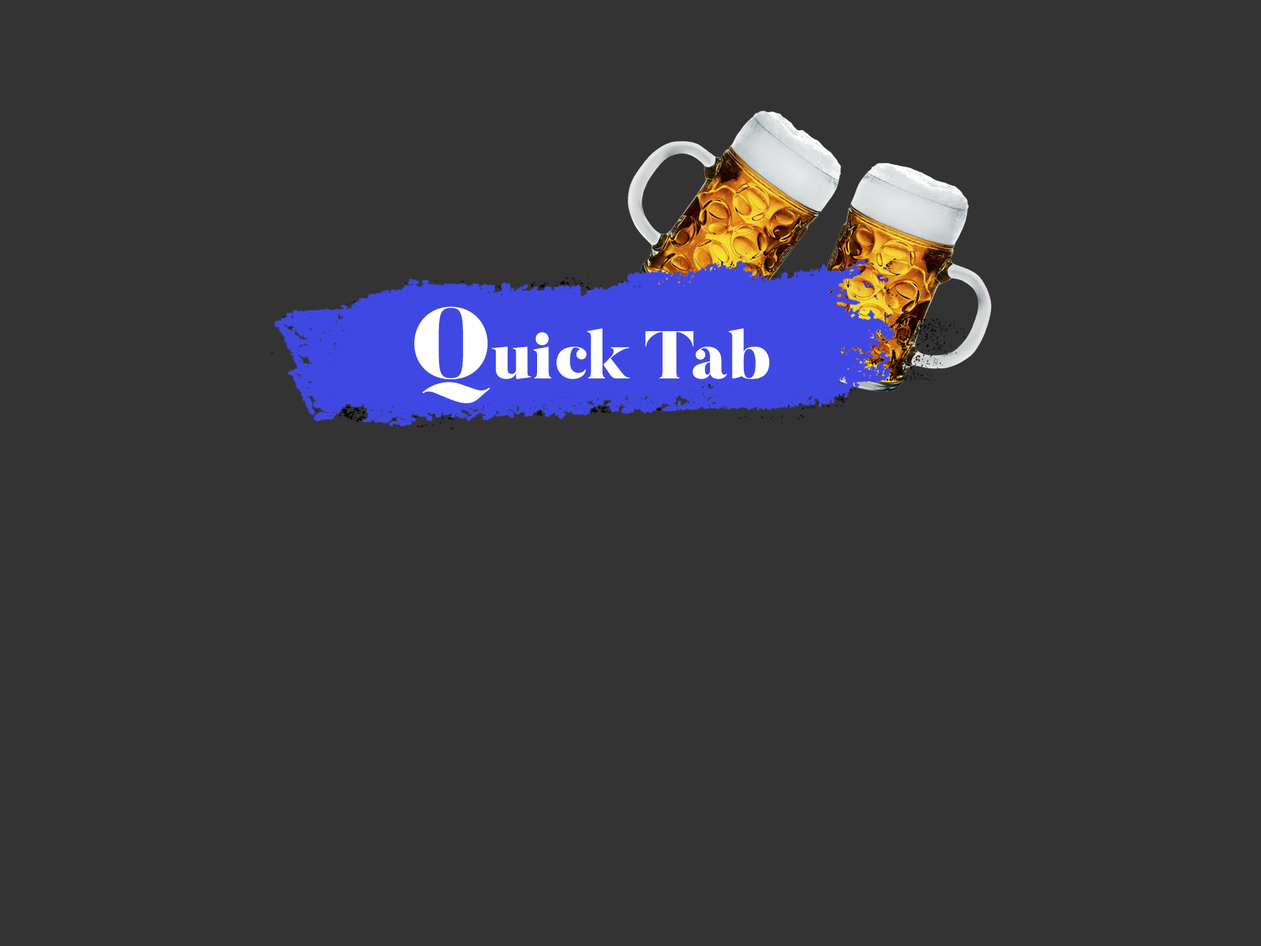
<style>
.page{position:relative;width:1261px;height:946px;background:#333333}
.page>*{position:absolute;margin:0}
.t1{font:100.1px "Butler-Black";color:#ffffff}
.t2{font:66.7px "Butler-Black";color:#ffffff}
</style>
<div class="page">
<p class="t1" style="left:414px;top:306px;width:76px;height:97px">Q</p>
<p class="t2" style="left:492px;top:328px;width:277px;height:51px">uick Tab</p>
</div>
